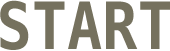
<style>
.page{position:relative;width:170px;height:51px;background:#ffffff}
.page>*{position:absolute;margin:0}
.t1{font:65px "Menlo-Bold";color:#75715e;scale:0.9 1}
</style>
<div class="page">
<p class="t1" style="left:0px;top:0px;width:171px;height:50px">START</p>
</div>
